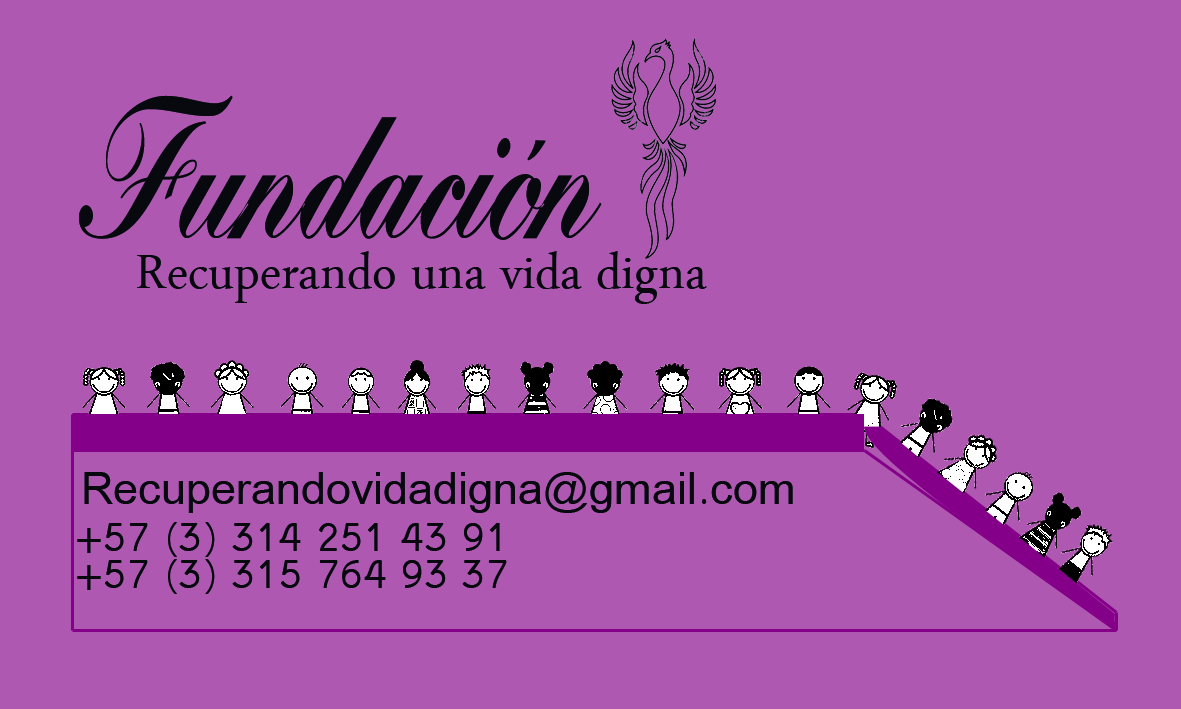
<style>
.page{position:relative;width:1181px;height:709px;background:#af58b1}
.page>*{position:absolute;margin:0}
.t1{font:200px "Bolina";color:#08090e}
.t2{font:70.8px "ArabicTypesetting";color:#08090e}
.t3{font:50px "Miriam";color:#08090e}
</style>
<div class="page">
<p class="t1" style="left:79px;top:95px;width:523px;height:145px">Fundación</p>
<p class="t2" style="left:137px;top:251px;width:570px;height:53px">Recuperando una vida digna</p>
<p class="t3" style="left:84px;top:472px;width:709px;height:41px">Recuperandovidadigna@gmail.com</p>
<p class="t3" style="left:77px;top:522px;width:423px;height:35px">+57 (3) 314 251 43 91</p>
<p class="t3" style="left:77px;top:559px;width:430px;height:35px">+57 (3) 315 764 93 37</p>
</div>
